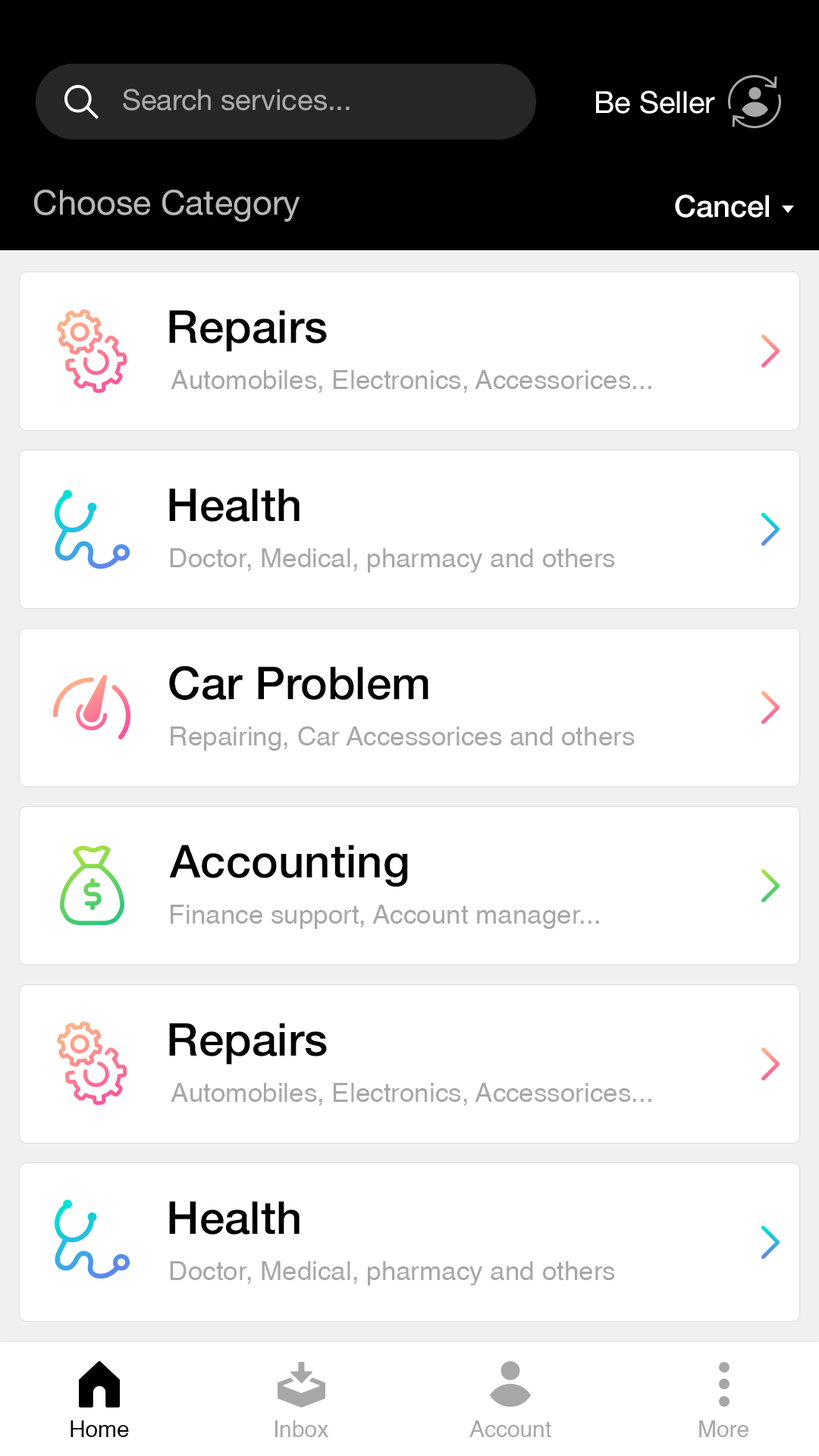
<style>
.page{position:relative;width:819px;height:1456px;background:#ffffff}
.page>*{position:absolute;margin:0}
.t1{font:28.8px "HelveticaNeue";color:#aaaaaa}
.t2{font:30.4px "HelveticaNeue";color:#ffffff}
.t3{font:34.1px "HelveticaNeue";color:#b8b8b8}
.t4{font:30.4px "HelveticaNeue-Medium";color:#ffffff}
.t5{font:45.5px "HelveticaNeue-Medium";color:#000000}
.t6{font:26.5px "Helvetica";color:#a7a7a7}
.t7{font:22.7px "Helvetica";color:#000000}
.t8{font:22.7px "Helvetica";color:#a7a7a7}
</style>
<div class="page">
<p class="t1" style="left:123px;top:89px;width:227px;height:22px">Search services...</p>
<p class="t2" style="left:596px;top:90px;width:119px;height:24px">Be Seller</p>
<p class="t3" style="left:34px;top:190px;width:266px;height:32px">Choose Category</p>
<p class="t4" style="left:675px;top:194px;width:94px;height:24px">Cancel</p>
<p class="t5" style="left:169px;top:310px;width:158px;height:42px">Repairs</p>
<p class="t6" style="left:171px;top:370px;width:480px;height:23px">Automobiles, Electronics, Accessorices...</p>
<p class="t5" style="left:169px;top:488px;width:131px;height:34px">Health</p>
<p class="t6" style="left:170px;top:548px;width:445px;height:25px">Doctor, Medical, pharmacy and others</p>
<p class="t5" style="left:169px;top:666px;width:259px;height:34px">Car Problem</p>
<p class="t6" style="left:171px;top:726px;width:464px;height:25px">Repairing, Car Accessorices and others</p>
<p class="t5" style="left:169px;top:845px;width:239px;height:42px">Accounting</p>
<p class="t6" style="left:171px;top:905px;width:428px;height:24px">Finance support, Account manager...</p>
<p class="t5" style="left:169px;top:1023px;width:158px;height:42px">Repairs</p>
<p class="t6" style="left:171px;top:1083px;width:480px;height:23px">Automobiles, Electronics, Accessorices...</p>
<p class="t5" style="left:169px;top:1201px;width:131px;height:34px">Health</p>
<p class="t6" style="left:170px;top:1261px;width:445px;height:24px">Doctor, Medical, pharmacy and others</p>
<p class="t7" style="left:71px;top:1420px;width:58px;height:17px">Home</p>
<p class="t8" style="left:275px;top:1420px;width:53px;height:17px">Inbox</p>
<p class="t8" style="left:469px;top:1420px;width:82px;height:17px">Account</p>
<p class="t8" style="left:699px;top:1420px;width:49px;height:17px">More</p>
</div>
